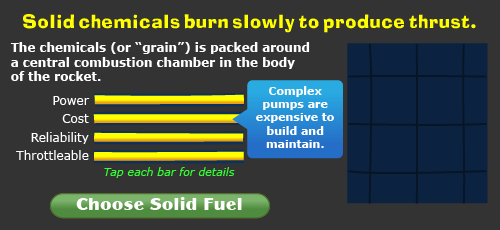
<style>
.page{position:relative;width:500px;height:230px;background:#333333}
.page>*{position:absolute;margin:0}
.t1{font:18px "Blox-Regular";letter-spacing:0.05em;color:#ffff00}
.t2{font:12px "Verdana-Bold";color:#ffffff}
.t3{font:11px "Verdana-Bold";color:#ffffff}
.t4{font:12px "Verdana";color:#ffffff}
.t5{font:11px "Verdana-Italic";color:#33ff33}
.t6{font:18px "Panache-Black-DTC";letter-spacing:0.025em;color:#ffffff}
</style>
<div class="page">
<p class="t1" style="left:23px;top:14px;width:453px;height:19px">Solid chemicals burn slowly to produce thrust.</p>
<p class="t2" style="left:10px;top:42px;width:300px;height:39px">The chemicals (or “grain”) is packed around a central combustion chamber in the body of the rocket.</p>
<p class="t3" style="left:256px;top:86px;width:78px;height:62px;text-align:center">Complex pumps are expensive to build and maintain.</p>
<p class="t4" style="left:53px;top:96px;width:37px;height:9px">Power</p>
<p class="t4" style="left:62px;top:114px;width:27px;height:9px">Cost</p>
<p class="t4" style="left:31px;top:132px;width:58px;height:12px">Reliability</p>
<p class="t4" style="left:16px;top:150px;width:73px;height:10px">Throttleable</p>
<p class="t5" style="left:104px;top:167px;width:131px;height:11px">Tap each bar for details</p>
<p class="t6" style="left:76px;top:197px;width:166px;height:13px">Choose Solid Fuel</p>
<p class="t6" style="left:76px;top:197px;width:166px;height:13px">Choose Solid Fuel</p>
</div>
